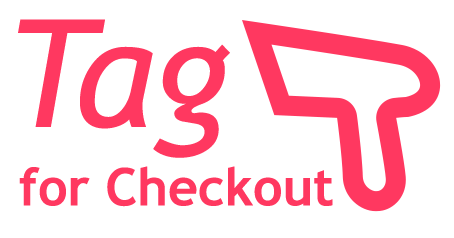
<style>
.page{position:relative;width:454px;height:238px;background:#ffffff}
.page>*{position:absolute;margin:0}
.t1{font:150px "TrebuchetMS-Italic";color:#ff3860}
.t2{font:52px "TrebuchetMS-Bold";color:#ff3860}
</style>
<div class="page">
<p class="t1" style="left:18px;top:19px;width:212px;height:139px">Tag</p>
<p class="t2" style="left:19px;top:166px;width:314px;height:41px">for Checkout</p>
</div>
